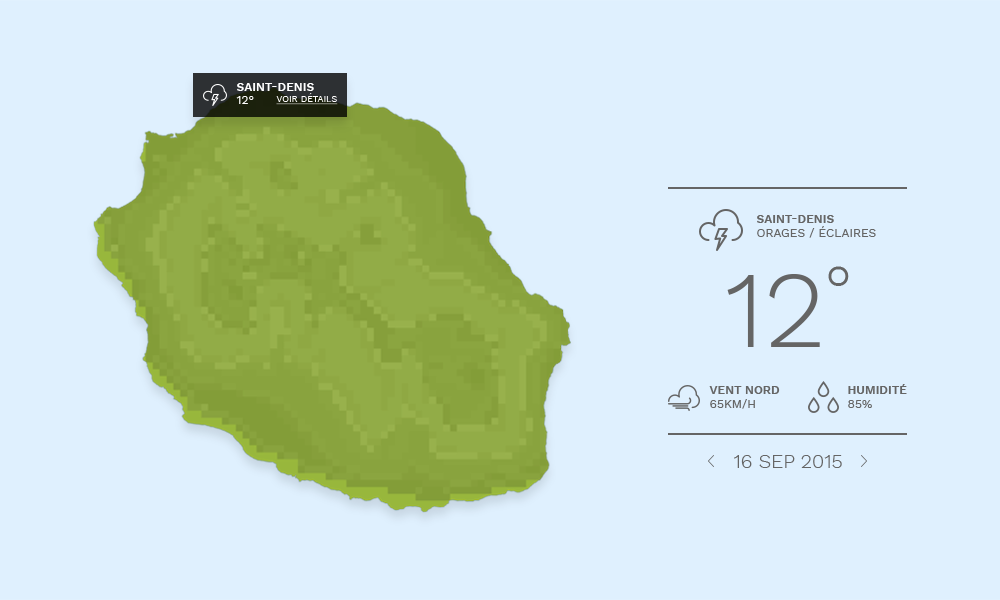
<style>
.page{position:relative;width:1000px;height:600px;background:#dff0fe}
.page>*{position:absolute;margin:0}
.t1{font:12px "WorkSans-SemiBold";color:#ffffff;text-transform:uppercase}
.t2{font:12px "WorkSans-Regular";color:#fffefe;text-transform:uppercase}
.t3{font:9px "WorkSans-Regular";color:#fffefe;text-transform:uppercase;text-decoration:underline}
.t4{font:12px "WorkSans-SemiBold";color:#656565;text-transform:uppercase}
.t5{font:12px "WorkSans-Regular";color:#656565;text-transform:uppercase}
.t6{font:110px "WorkSans-Light";color:#656565}
.t7{font:20px "WorkSans-Light";color:#656565}
</style>
<div class="page">
<p class="t1" style="left:237px;top:83px;width:77px;height:8px">saint-denis</p>
<p class="t2" style="left:236px;top:96px;width:18px;height:8px">12°</p>
<p class="t3" style="left:276px;top:93px;width:62px;height:12px">voir détails</p>
<p class="t4" style="left:757px;top:215px;width:77px;height:8px">saint-denis</p>
<p class="t5" style="left:757px;top:226px;width:119px;height:12px">ORAGES / éclaires</p>
<p class="t6" style="left:727px;top:266px;width:122px;height:81px">12°</p>
<p class="t4" style="left:709px;top:386px;width:71px;height:8px">VENT NORD</p>
<p class="t4" style="left:848px;top:384px;width:59px;height:10px">humidité</p>
<p class="t5" style="left:710px;top:399px;width:45px;height:10px">65KM/H</p>
<p class="t5" style="left:848px;top:400px;width:24px;height:8px">85%</p>
<p class="t7" style="left:734px;top:455px;width:108px;height:13px">16 SEP 2015</p>
</div>
